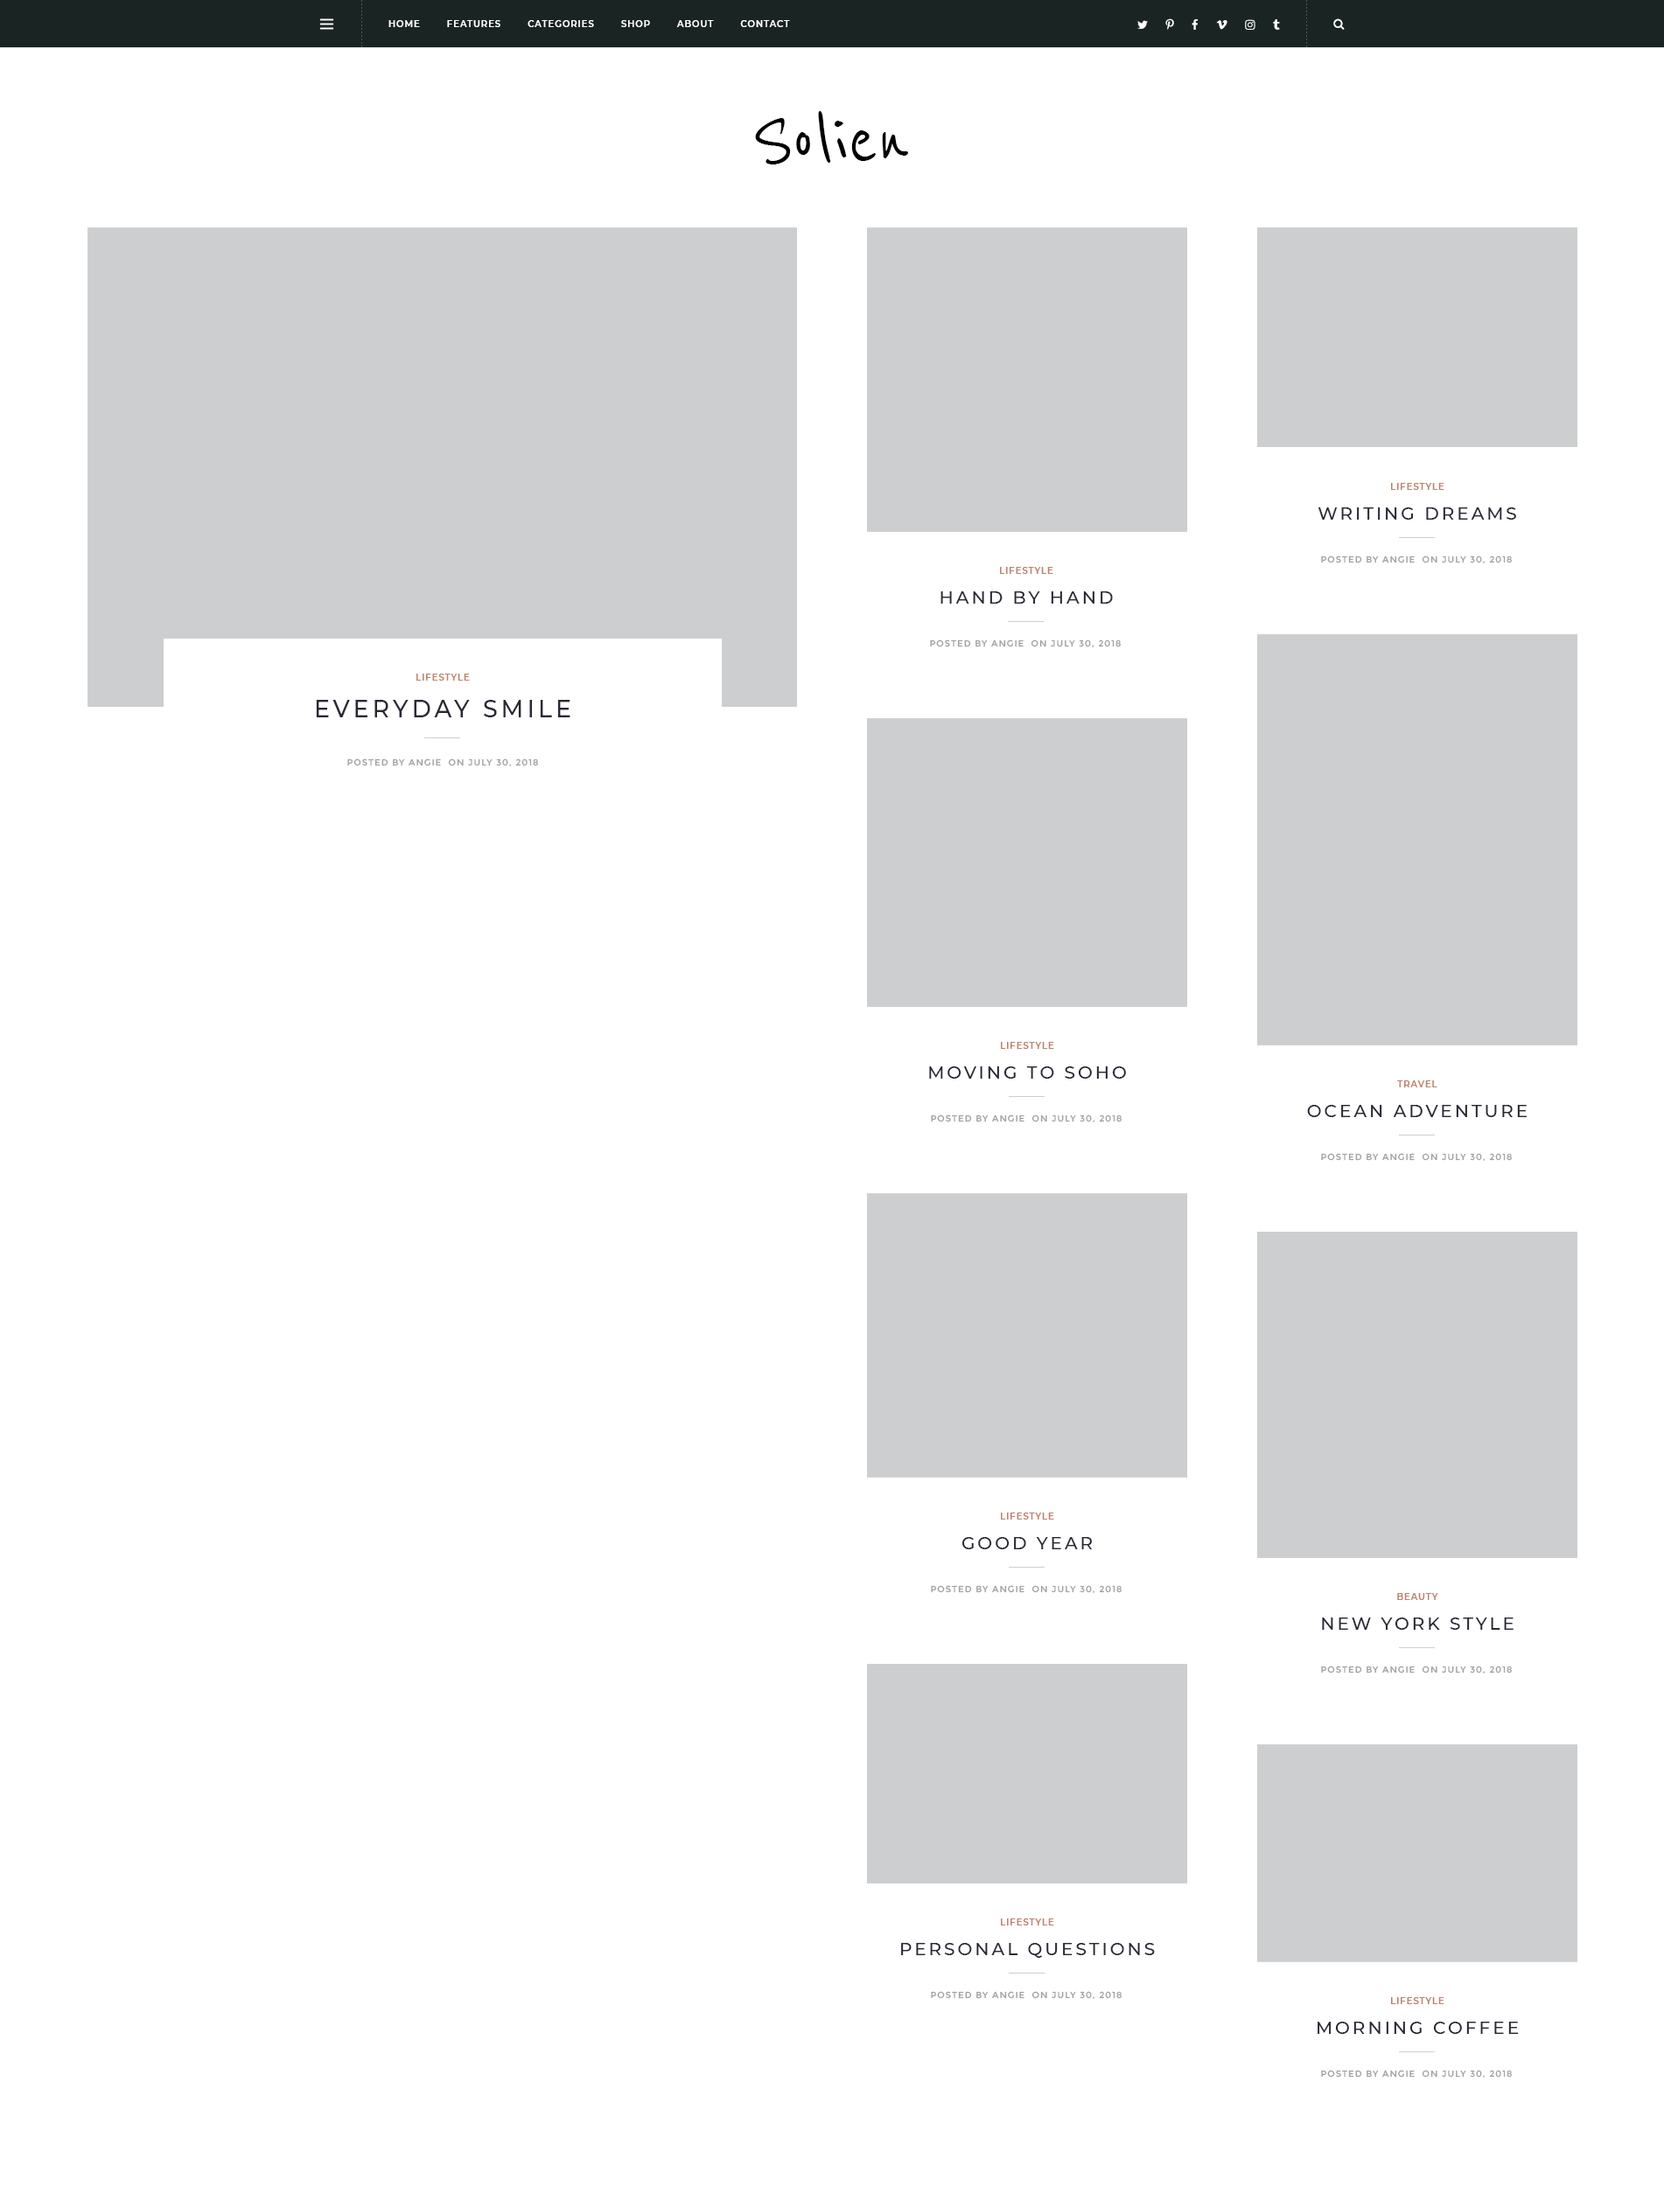
<style>
.page{position:relative;width:1664px;height:2187px;background:#ffffff}
.page>*{position:absolute;margin:0}
.t1{font:8.7px "Montserrat-SemiBold";letter-spacing:0.1em;color:#ffffff;text-transform:uppercase}
.t2{font:87.5px "ReenieBeanie";color:#000000}
.t3{font:8.7px "Montserrat-SemiBold";letter-spacing:0.1em;color:#be816c;text-transform:uppercase}
.t4{font:17.5px "Montserrat-Medium";letter-spacing:0.15em;color:#2b2735;text-transform:uppercase}
.t5{font:8.7px "Montserrat-Regular";letter-spacing:0.1em;color:#a0a1a2;text-transform:uppercase}
.t6{font:23.6px "Montserrat-Medium";letter-spacing:0.15em;color:#2b2735;text-transform:uppercase}
</style>
<div class="page">
<p class="t1" style="left:388px;top:20px;width:402px;height:7px">Home        Features        Categories        Shop        About        Contact</p>
<p class="t2" style="left:755px;top:111px;width:153px;height:53px">Solien</p>
<p class="t3" style="left:1391px;top:483px;width:53px;height:7px">Lifestyle</p>
<p class="t4" style="left:1317px;top:507px;width:199px;height:13px">Writing Dreams</p>
<p class="t5" style="left:1321px;top:555px;width:190px;height:9px">Posted by Angie  on July 30, 2018</p>
<p class="t3" style="left:1000px;top:567px;width:53px;height:7px">Lifestyle</p>
<p class="t4" style="left:940px;top:591px;width:173px;height:13px">Hand by Hand</p>
<p class="t5" style="left:930px;top:639px;width:191px;height:9px">Posted by Angie  on July 30, 2018</p>
<p class="t3" style="left:416px;top:674px;width:54px;height:7px">Lifestyle</p>
<p class="t6" style="left:316px;top:700px;width:254px;height:17px">Everyday Smile</p>
<p class="t5" style="left:347px;top:758px;width:191px;height:9px">Posted by Angie  on July 30, 2018</p>
<p class="t3" style="left:1001px;top:1042px;width:53px;height:7px">Lifestyle</p>
<p class="t4" style="left:929px;top:1066px;width:197px;height:13px">Moving to SOHO</p>
<p class="t3" style="left:1397px;top:1080px;width:40px;height:7px">Travel</p>
<p class="t4" style="left:1307px;top:1105px;width:220px;height:12px">Ocean Adventure</p>
<p class="t5" style="left:931px;top:1114px;width:190px;height:9px">Posted by Angie  on July 30, 2018</p>
<p class="t5" style="left:1321px;top:1153px;width:190px;height:9px">Posted by Angie  on July 30, 2018</p>
<p class="t3" style="left:1001px;top:1512px;width:53px;height:7px">Lifestyle</p>
<p class="t4" style="left:961px;top:1537px;width:132px;height:12px">Good Year</p>
<p class="t5" style="left:931px;top:1585px;width:190px;height:9px">Posted by Angie  on July 30, 2018</p>
<p class="t3" style="left:1397px;top:1593px;width:41px;height:7px">Beauty</p>
<p class="t4" style="left:1322px;top:1617px;width:191px;height:13px">New York Style</p>
<p class="t5" style="left:1321px;top:1665px;width:190px;height:9px">Posted by Angie  on July 30, 2018</p>
<p class="t3" style="left:1001px;top:1918px;width:53px;height:7px">Lifestyle</p>
<p class="t4" style="left:901px;top:1943px;width:254px;height:15px">Personal Questions</p>
<p class="t5" style="left:931px;top:1991px;width:190px;height:9px">Posted by Angie  on July 30, 2018</p>
<p class="t3" style="left:1391px;top:1997px;width:53px;height:7px">Lifestyle</p>
<p class="t4" style="left:1317px;top:2021px;width:201px;height:13px">Morning Coffee</p>
<p class="t5" style="left:1321px;top:2070px;width:190px;height:8px">Posted by Angie  on July 30, 2018</p>
</div>
